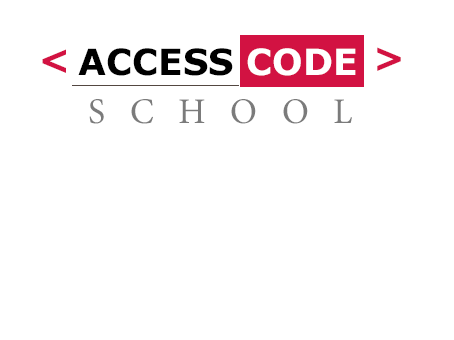
<style>
.page{position:relative;width:454px;height:340px;background:#ffffff}
.page>*{position:absolute;margin:0}
.t1{font:36px "Verdana-Bold";color:#d21242}
.t2{font:36px "Verdana-Bold";color:#000000}
.t3{font:36px "Verdana-Bold";color:#ffffff}
.t4{font:36px "MinionPro-Regular";color:#7b7b7b}
</style>
<div class="page">
<p class="t1" style="left:42px;top:49px;width:24px;height:24px">&lt;</p>
<p class="t2" style="left:78px;top:48px;width:155px;height:28px">ACCESS</p>
<p class="t3" style="left:247px;top:48px;width:109px;height:28px">CODE</p>
<p class="t1" style="left:377px;top:47px;width:24px;height:24px">&gt;</p>
<p class="t4" style="left:89px;top:99px;width:263px;height:25px">S   C   H   O   O   L</p>
</div>
